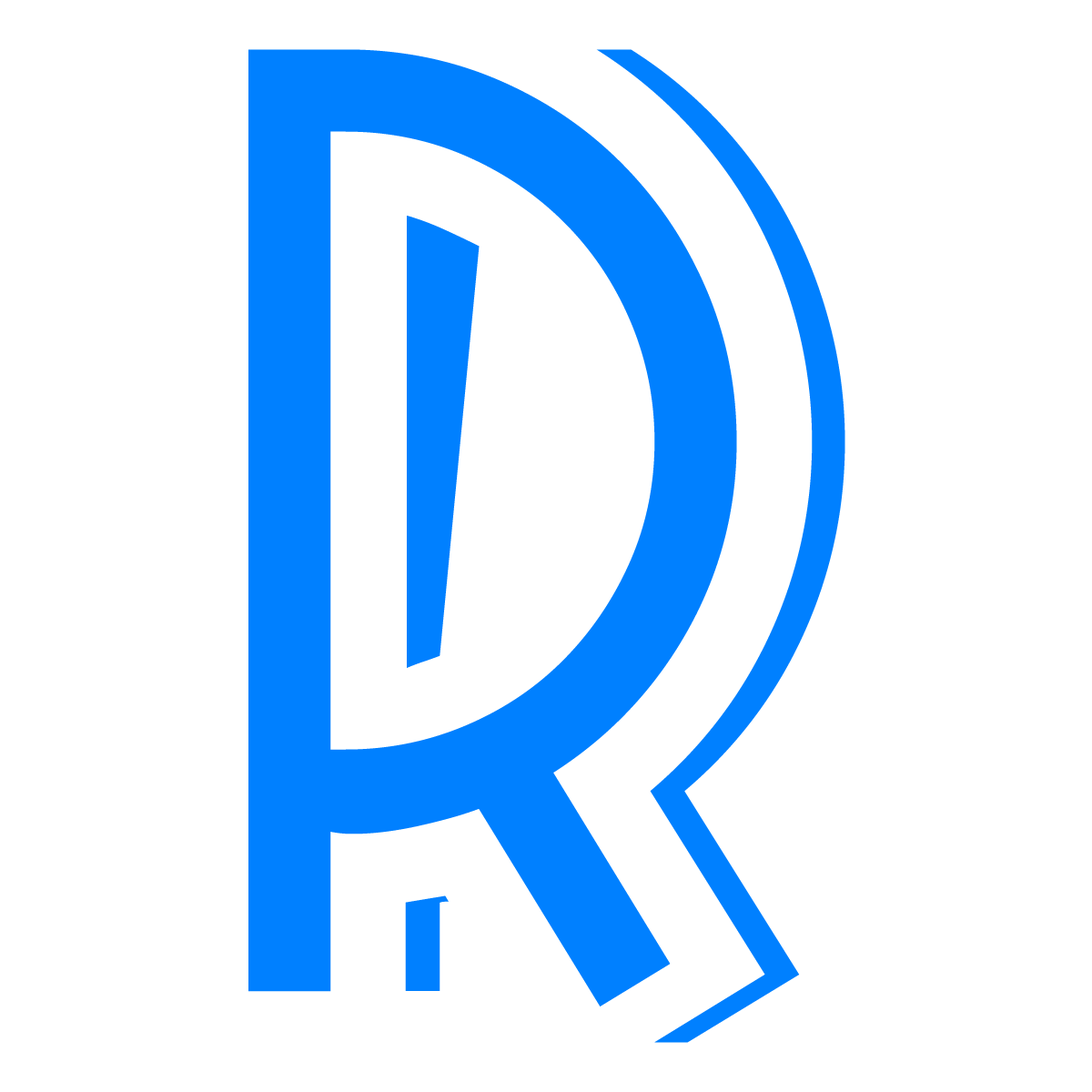
<style>
.page{position:relative;width:1092px;height:1092px;background:#ffffff}
.page>*{position:absolute;margin:0}
.t1{font:1092px "SeasideResortNF";color:#0080ff}
</style>
<div class="page">
<p class="t1" style="left:248px;top:49px;width:597px;height:994px">R</p>
</div>
